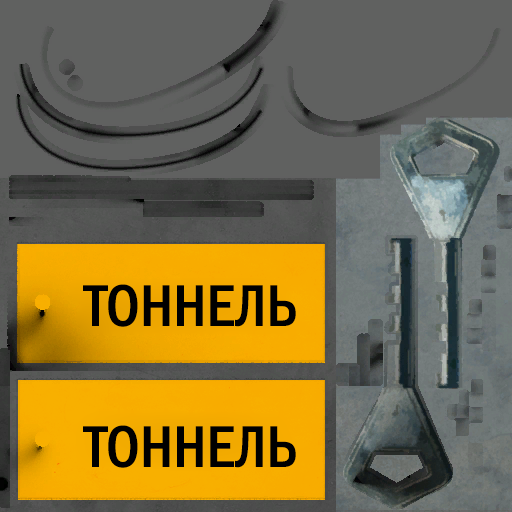
<style>
.page{position:relative;width:512px;height:512px;background:#606160}
.page>*{position:absolute;margin:0}
.t1{font:59px "FranklinGothicMediCondSCC";color:#000000}
</style>
<div class="page">
<p class="t1" style="left:83px;top:284px;width:213px;height:43px">ТОННЕЛЬ</p>
<p class="t1" style="left:83px;top:425px;width:213px;height:43px">ТОННЕЛЬ</p>
</div>
